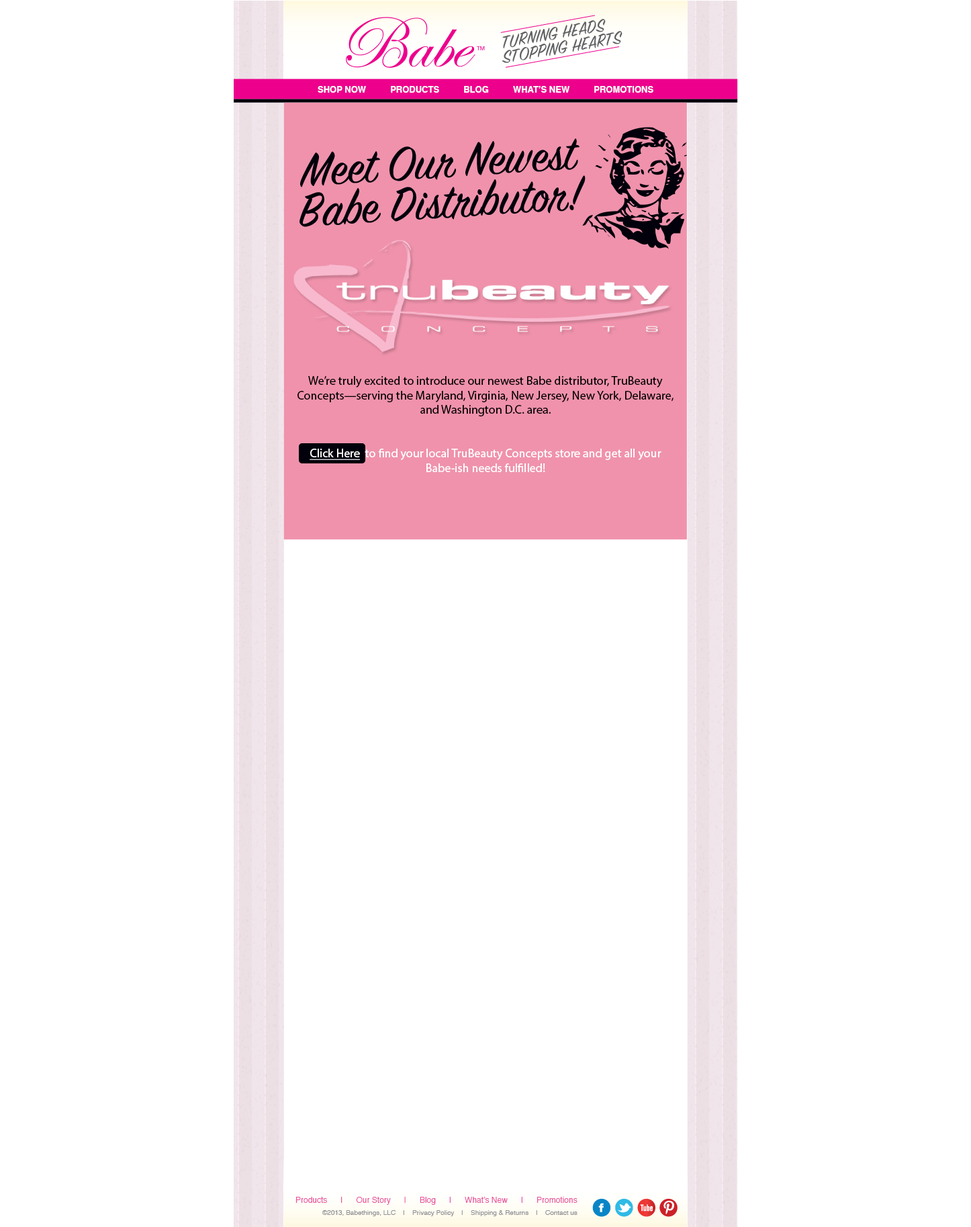
<style>
.page{position:relative;width:971px;height:1227px;background:#ffffff}
.page>*{position:absolute;margin:0}
.t1{font:19.5px "SignPainterHouseScript";color:#5f6062}
.t2{font:8.7px "Helvetica-Bold";color:#ffffff}
.t3{font:52.5px/40.4px "SignPainterHouseScript";color:#01000b}
.t4{font:12.1px "MyriadPro-Regular";color:#000000}
.t5{font:12.1px "MyriadPro-Regular";color:#ffffff;text-decoration:underline}
.t6{font:12.1px "MyriadPro-Regular";color:#ffffff}
.t7{font:8.1px "Helvetica";color:#e9559e}
.t8{font:6.7px "Helvetica";color:#919396}
</style>
<div class="page">
<p class="t1" style="left:503px;top:19px;width:103px;height:29px">TURNING HEADS</p>
<p class="t1" style="left:502px;top:31px;width:121px;height:32px">STOPPING HEARTS</p>
<p class="t2" style="left:318px;top:86px;width:336px;height:7px">SHOP NOW          PRODUCTS          BLOG          WHAT’S NEW          PROMOTIONS</p>
<p class="t3" style="left:300px;top:138px;width:286px;height:89px;text-align:center">Meet Our Newest<br>Babe Distributor!</p>
<p class="t4" style="left:298px;top:376px;width:376px;height:96px;text-align:center">We’re truly excited to introduce our newest Babe distributor, TruBeauty Concepts—serving the Maryland, Virginia, New Jersey, New York, Delaware, and Washington D.C. area.<br><br><br><span class="t5">Click Here</span><span class="t6">  to find your local TruBeauty Concepts store and get all your Babe-ish needs fulfilled!</span></p>
<p class="t7" style="left:296px;top:1197px;width:282px;height:8px">Products      |      Our Story      |      Blog      |      What’s New      |      Promotions</p>
<p class="t8" style="left:322px;top:1211px;width:256px;height:6px">©2013, Babethings, LLC    |    Privacy Policy    |    Shipping &amp; Returns    |    Contact us</p>
</div>
